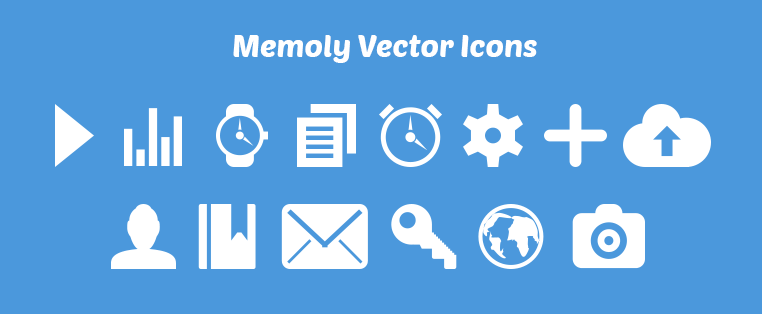
<style>
.page{position:relative;width:762px;height:314px;background:#4b98dc}
.page>*{position:absolute;margin:0}
.t1{font:31.1px "PoetsenOne-Regular";color:#ffffff}
</style>
<div class="page">
<p class="t1" style="left:233px;top:35px;width:304px;height:28px">Memoly Vector Icons</p>
</div>
